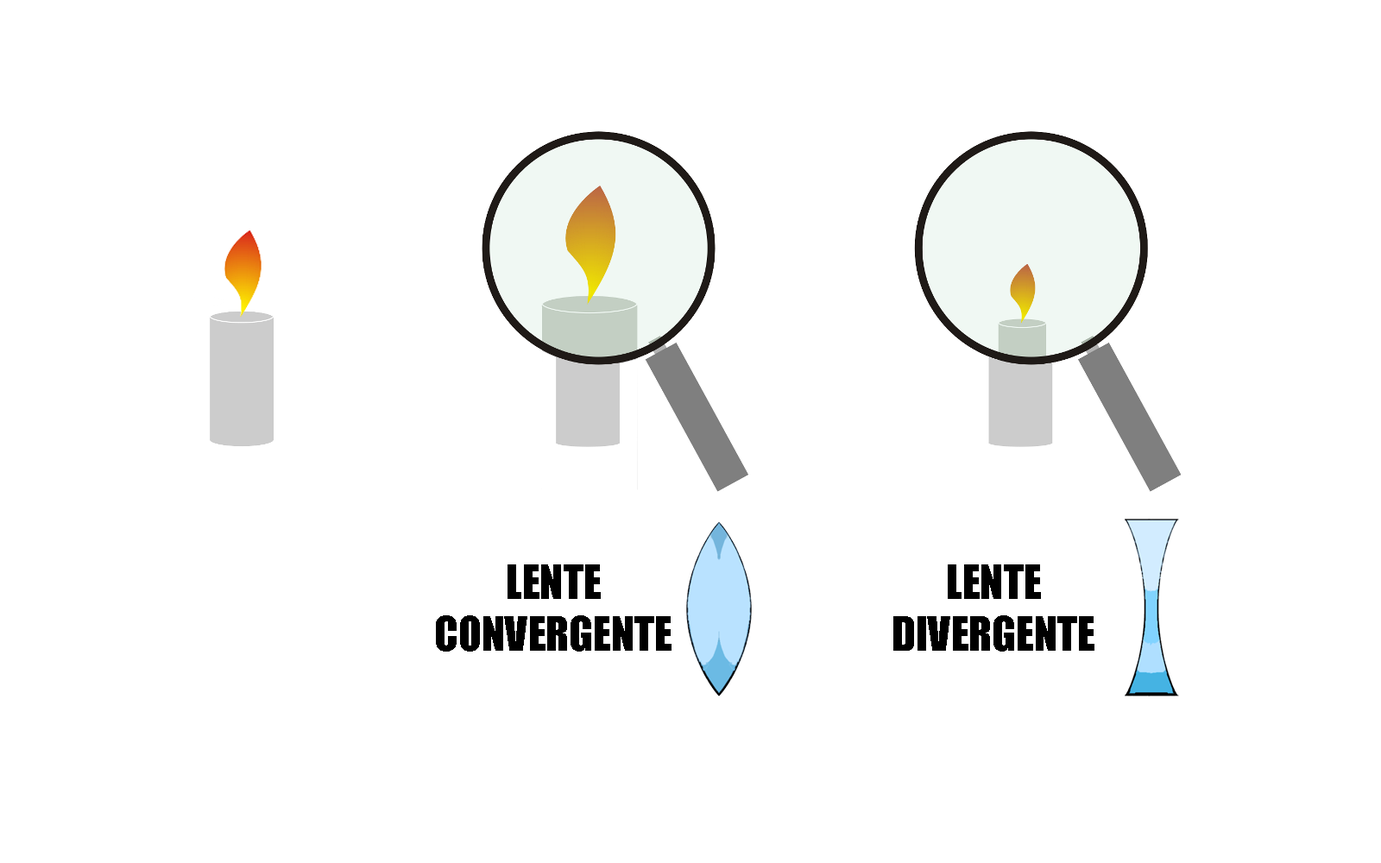
<style>
.page{position:relative;width:1381px;height:863px;background:#ffffff}
.page>*{position:absolute;margin:0}
.t1{font:43.2px "Impact";color:#000000}
</style>
<div class="page">
<p class="t1" style="left:436px;top:565px;width:236px;height:87px;text-align:center">LENTE<br>CONVERGENTE</p>
<p class="t1" style="left:894px;top:565px;width:201px;height:87px;text-align:center">LENTE<br>DIVERGENTE</p>
</div>
